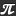
<style>
.page{position:relative;width:16px;height:16px;background:#333333}
.page>*{position:absolute;margin:0}
.t1{font:24.5px "MonotypeCorsiva";color:#ffffff;font-weight:bold;scale:0.96 1}
</style>
<div class="page">
<p class="t1" style="left:0px;top:4px;width:16px;height:11px">π</p>
</div>
